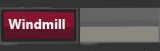
<style>
.page{position:relative;width:160px;height:51px;background:#333333}
.page>*{position:absolute;margin:0}
.t1{font:13.3px "KhmerUI-Bold";color:#f4ecee}
</style>
<div class="page">
<p class="t1" style="left:8px;top:19px;width:57px;height:10px">Windmill</p>
</div>
